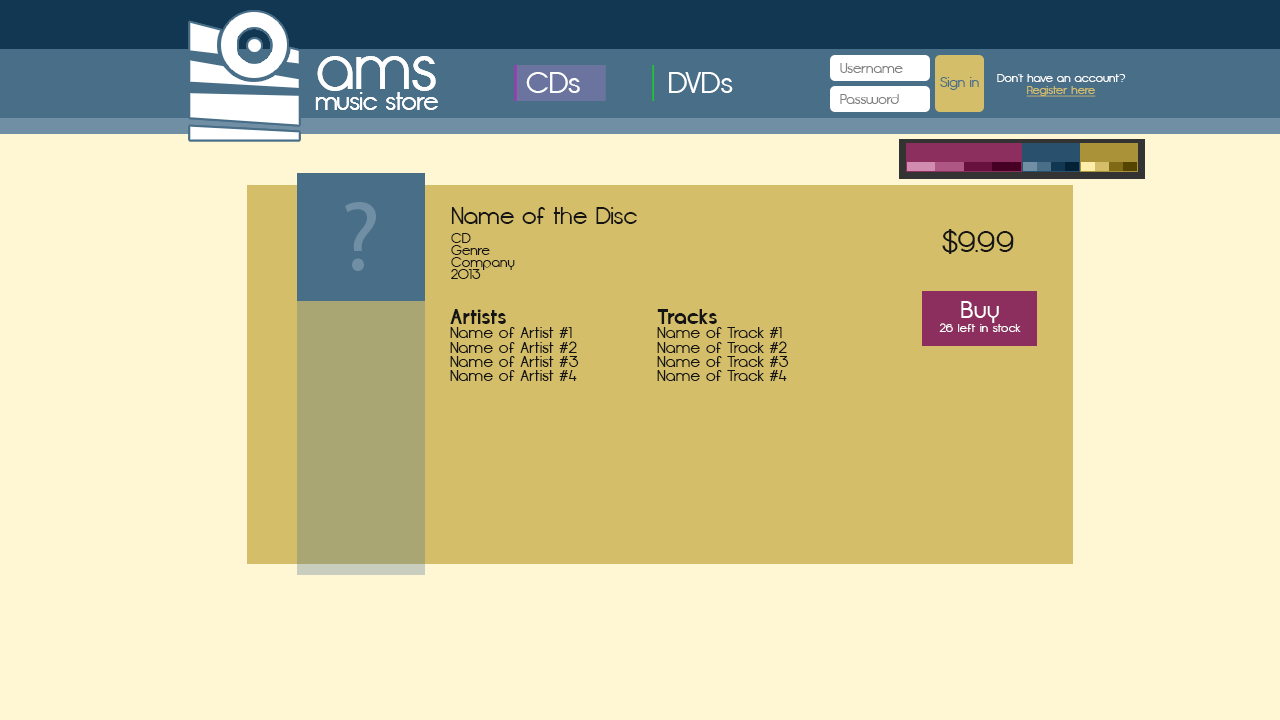
<style>
.page{position:relative;width:1280px;height:720px;background:#fff6d4}
.page>*{position:absolute;margin:0}
.t1{font:62.5px "Opificio";color:#ffffff}
.t2{font:14px "Opificio";color:#828282}
.t3{font:30px "Opificio";color:#ffffff}
.t4{font:14px "Opificio";color:#486e88}
.t5{font:12px/12px "Opificio";color:#ffffff}
.t6{font:12px/12px "Opificio";color:#d4be6a;text-decoration:underline}
.t7{font:24.8px "Opificio";color:#ffffff}
.t8{font:100px "MyriadPro-Regular";color:#708ea4}
.t9{font:24px "Opificio";color:#141414}
.t10{font:14px/12px "Opificio";color:#141414}
.t11{font:30px "Opificio";letter-spacing:0.025em;color:#141414}
.t12{font:12px "Opificio";letter-spacing:0.025em;color:#ffffff}
.t13{font:24px "Opificio";letter-spacing:0.025em;color:#ffffff}
.t14{font:16.5px/14.1px "Opificio";color:#141414}
.t15{font:21.2px/14.1px "Opificio-Bold";color:#141414}
</style>
<div class="page">
<p class="t1" style="left:317px;top:56px;width:119px;height:35px">ams</p>
<p class="t2" style="left:840px;top:63px;width:63px;height:10px">Username</p>
<p class="t3" style="left:526px;top:72px;width:54px;height:21px">CDs</p>
<p class="t3" style="left:669px;top:72px;width:64px;height:21px">DVDs</p>
<p class="t4" style="left:940px;top:77px;width:39px;height:13px">Sign in</p>
<p class="t5" style="left:997px;top:74px;width:129px;height:23px;text-align:center">Don’t have an account?<br><span class="t6">Register here</span></p>
<p class="t7" style="left:315px;top:92px;width:123px;height:18px">music store</p>
<p class="t2" style="left:840px;top:94px;width:59px;height:10px">Password</p>
<p class="t8" style="left:345px;top:202px;width:31px;height:69px">?</p>
<p class="t9" style="left:451px;top:207px;width:186px;height:17px">Name of the Disc</p>
<p class="t10" style="left:451px;top:233px;width:64px;height:46px;text-align:right">CD<br>Genre<br>Company<br>2013</p>
<p class="t11" style="left:942px;top:229px;width:72px;height:25px">$9.99</p>
<p class="t12" style="left:939px;top:301px;width:82px;height:31px;text-align:center"><span class="t13">Buy<br></span>26 left in stock</p>
<p class="t14" style="left:450px;top:309px;width:129px;height:72px;text-align:right"><span class="t15">Artists<br></span>Name of Artist #1<br>Name of Artist #2<br>Name of Artist #3<br>Name of Artist #4</p>
<p class="t14" style="left:657px;top:309px;width:132px;height:72px;text-align:right"><span class="t15">Tracks<br></span>Name of Track #1<br>Name of Track #2<br>Name of Track #3<br>Name of Track #4</p>
</div>
